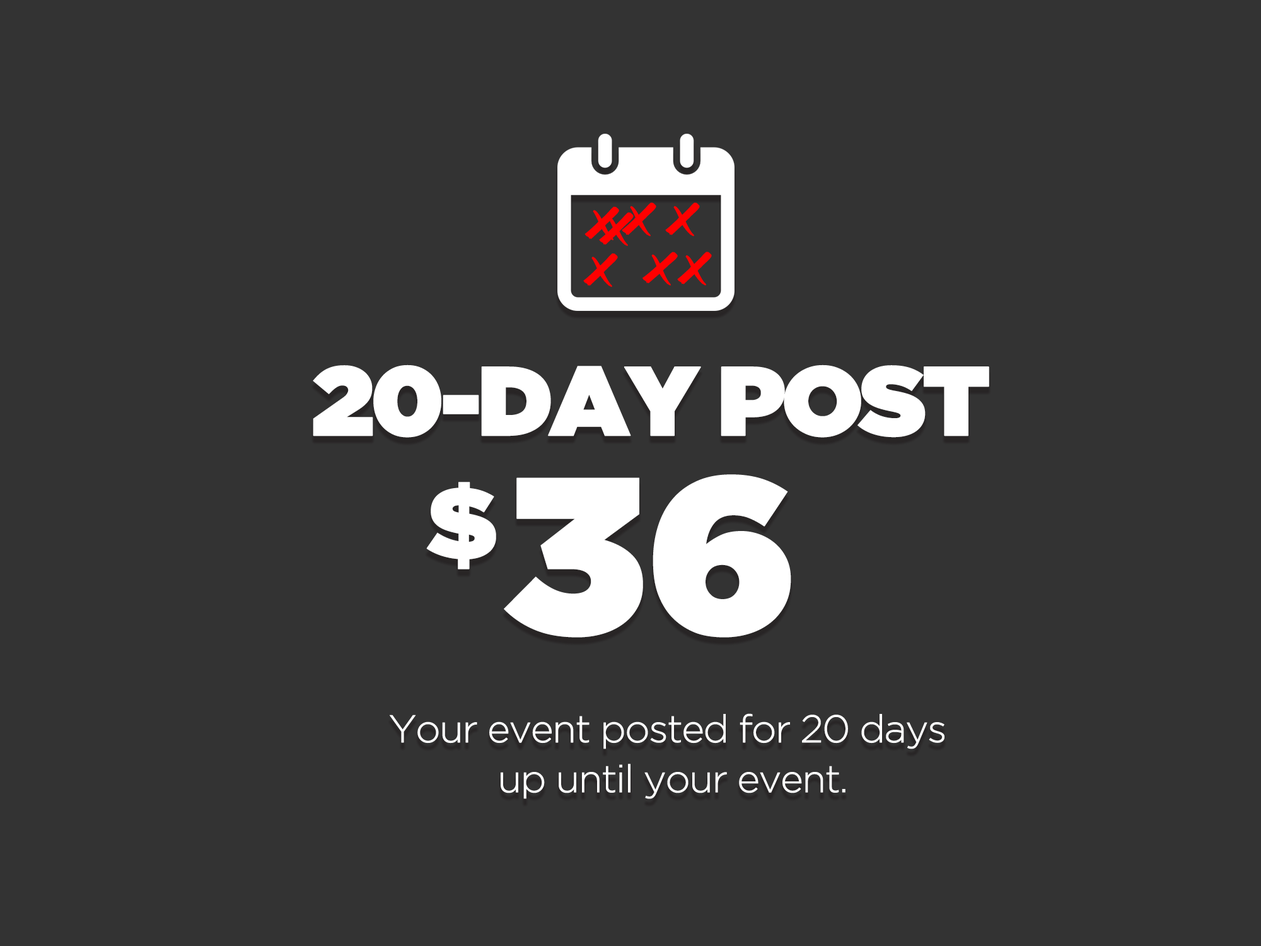
<style>
.page{position:relative;width:1261px;height:946px;background:#333333}
.page>*{position:absolute;margin:0}
.t1{font:47.4px "DaStreets";letter-spacing:-0.06em;color:#ff0000;font-weight:bold}
.t2{font:97.8px "GothamUltra";letter-spacing:-0.06em;color:#ffffff;font-weight:bold}
.t3{font:100.7px "GothamUltra";letter-spacing:-0.06em;color:#ffffff;font-weight:bold}
.t4{font:222.1px "GothamUltra";letter-spacing:-0.02em;color:#ffffff;font-weight:bold}
.t5{font:38.6px/49.9px "GothamLight";letter-spacing:-0.06em;color:#ffffff;font-weight:bold}
</style>
<div class="page">
<p class="t1" style="left:584px;top:206px;width:35px;height:34px">x</p>
<p class="t1" style="left:622px;top:202px;width:34px;height:34px">x</p>
<p class="t1" style="left:665px;top:202px;width:35px;height:34px">x</p>
<p class="t1" style="left:599px;top:212px;width:35px;height:34px">x</p>
<p class="t1" style="left:583px;top:253px;width:35px;height:34px">x</p>
<p class="t1" style="left:642px;top:252px;width:36px;height:34px;rotate:3deg">x</p>
<p class="t1" style="left:677px;top:252px;width:35px;height:34px">x</p>
<p class="t2" style="left:313px;top:364px;width:676px;height:74px">20-DAY POST</p>
<p class="t3" style="left:426px;top:482px;width:70px;height:87px">$</p>
<p class="t4" style="left:504px;top:474px;width:287px;height:163px">36</p>
<p class="t5" style="left:390px;top:713px;width:554px;height:86px;text-align:center">Your event posted for 20 days <br>up until your event.</p>
</div>
